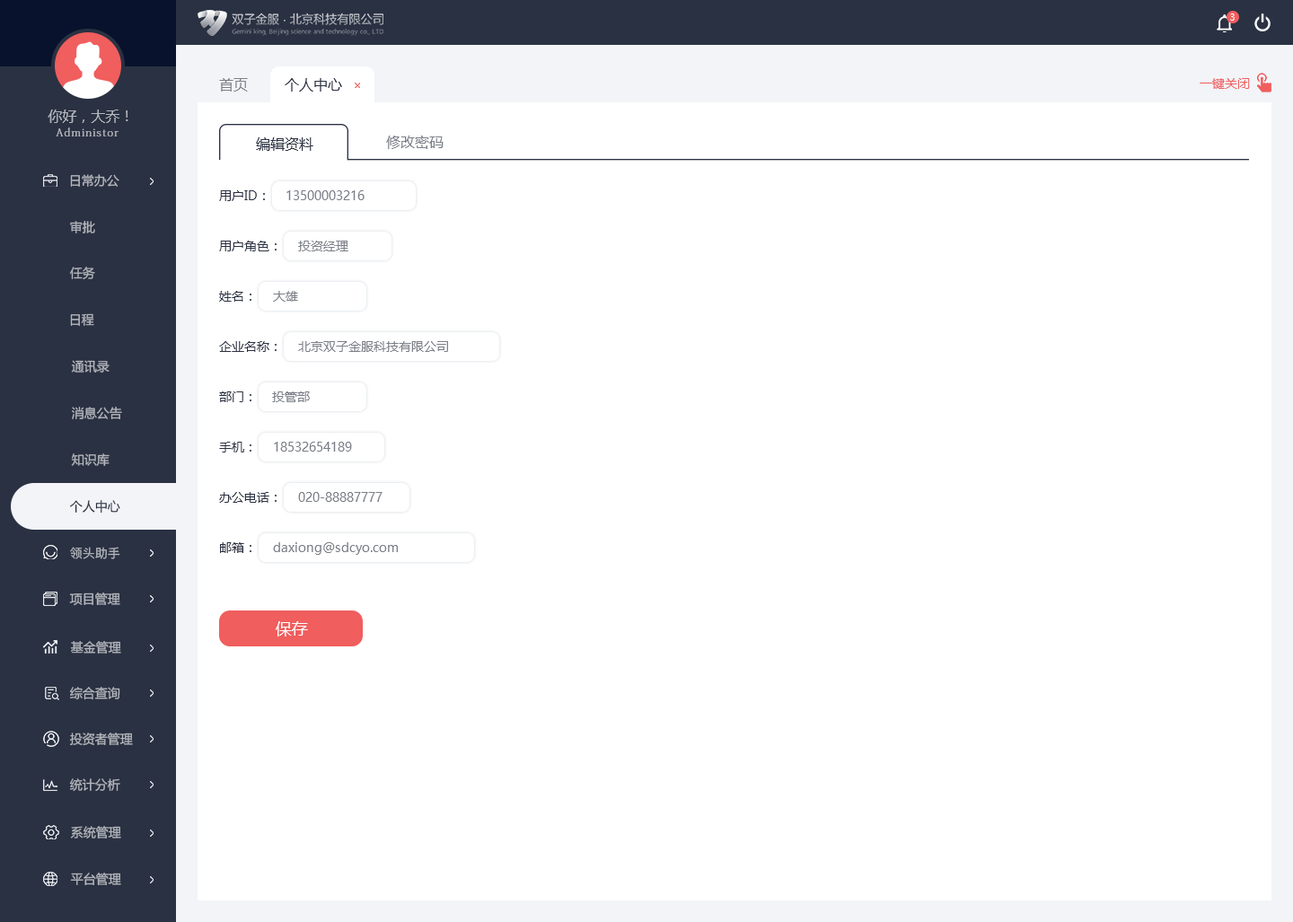
<style>
.page{position:relative;width:1293px;height:922px;background:#ffffff}
.page>*{position:absolute;margin:0}
.t1{font:9px "MicrosoftYaHeiUI";color:#ffffff}
.t2{font:14.4px "MicrosoftYaHeiMono";color:#7b7f88}
.t3{font:14.4px "MicrosoftYaHeiMono";color:#2a3142}
.t4{font:12.6px "MicrosoftYaHeiMono";color:#f05e5e}
.t5{font:14.4px "MicrosoftYaHeiMono";color:#b4b7bd}
.t6{font:10.8px "AdobeFangsongStd-Regular";letter-spacing:0.1em;color:#b4b7bd}
.t7{font:14.4px "MicrosoftYaHeiUI";color:#2a3142}
.t8{font:14.4px "MicrosoftYaHeiUI";color:#7b7f88}
.t9{font:12.6px "MicrosoftYaHeiUI";color:#b4b7bd}
.t10{font:12.6px "MicrosoftYaHeiUI";color:#2a3142}
.t11{font:12.6px "MicrosoftYaHeiUI";color:#7b7f88}
.t12{font:12.6px "PingFang-SC-Medium";color:#b4b7bd}
.t13{font:16.2px "MicrosoftYaHeiUI";color:#ffffff}
</style>
<div class="page">
<p class="t1" style="left:1230px;top:13px;width:5px;height:8px">3</p>
<p class="t2" style="left:219px;top:78px;width:29px;height:14px">首页</p>
<p class="t3" style="left:285px;top:78px;width:57px;height:14px">个人中心</p>
<p class="t4" style="left:1200px;top:78px;width:50px;height:11px">一键关闭</p>
<p class="t5" style="left:48px;top:110px;width:80px;height:13px">你好，大乔！</p>
<p class="t6" style="left:56px;top:128px;width:63px;height:8px">Administor</p>
<p class="t7" style="left:256px;top:137px;width:57px;height:14px">编辑资料</p>
<p class="t8" style="left:386px;top:136px;width:58px;height:13px">修改密码</p>
<p class="t9" style="left:70px;top:174px;width:49px;height:13px">日常办公</p>
<p class="t10" style="left:219px;top:190px;width:46px;height:11px">用户ID：</p>
<p class="t11" style="left:286px;top:190px;width:79px;height:10px">13500003216</p>
<p class="t9" style="left:70px;top:221px;width:25px;height:12px">审批</p>
<p class="t10" style="left:219px;top:241px;width:58px;height:10px">用户角色：</p>
<p class="t11" style="left:298px;top:241px;width:50px;height:10px">投资经理</p>
<p class="t9" style="left:69px;top:267px;width:26px;height:12px">任务</p>
<p class="t10" style="left:219px;top:291px;width:32px;height:11px">姓名：</p>
<p class="t11" style="left:273px;top:291px;width:25px;height:11px">大雄</p>
<p class="t9" style="left:70px;top:313px;width:24px;height:13px">日程</p>
<p class="t10" style="left:219px;top:341px;width:58px;height:11px">企业名称：</p>
<p class="t11" style="left:298px;top:341px;width:150px;height:11px">北京双子金服科技有限公司</p>
<p class="t9" style="left:71px;top:360px;width:39px;height:13px">通讯录</p>
<p class="t10" style="left:219px;top:392px;width:32px;height:10px">部门：</p>
<p class="t11" style="left:272px;top:392px;width:38px;height:10px">投管部</p>
<p class="t9" style="left:72px;top:407px;width:50px;height:12px">消息公告</p>
<p class="t10" style="left:219px;top:442px;width:32px;height:11px">手机：</p>
<p class="t11" style="left:274px;top:442px;width:78px;height:10px">18532654189</p>
<p class="t9" style="left:71px;top:453px;width:39px;height:13px">知识库</p>
<p class="t10" style="left:219px;top:492px;width:58px;height:11px">办公电话：</p>
<p class="t11" style="left:298px;top:492px;width:85px;height:10px">020-88887777</p>
<p class="t10" style="left:70px;top:500px;width:50px;height:14px">个人中心</p>
<p class="t10" style="left:220px;top:542px;width:31px;height:11px">邮箱：</p>
<p class="t11" style="left:273px;top:542px;width:125px;height:13px">daxiong@sdcyo.com</p>
<p class="t12" style="left:70px;top:547px;width:50px;height:12px">领头助手</p>
<p class="t9" style="left:69px;top:593px;width:51px;height:13px">项目管理</p>
<p class="t13" style="left:276px;top:621px;width:32px;height:16px">保存</p>
<p class="t9" style="left:70px;top:641px;width:51px;height:13px">基金管理</p>
<p class="t9" style="left:69px;top:687px;width:51px;height:13px">综合查询</p>
<p class="t9" style="left:69px;top:733px;width:64px;height:12px">投资者管理</p>
<p class="t9" style="left:69px;top:779px;width:51px;height:12px">统计分析</p>
<p class="t9" style="left:70px;top:826px;width:51px;height:13px">系统管理</p>
<p class="t9" style="left:70px;top:873px;width:51px;height:12px">平台管理</p>
</div>
